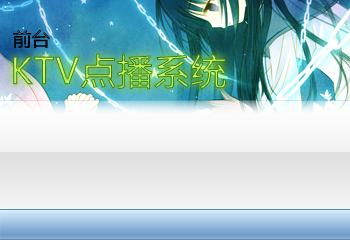
<style>
.page{position:relative;width:350px;height:240px}
.page>*{position:absolute;margin:0}
.t1{font:18.2px "MicrosoftYaHei";color:#000000;font-weight:bold}
.t2{font:35.8px "MicrosoftYaHei";font-weight:bold}
</style>
<div class="page">
<p class="t1" style="left:13px;top:30px;width:37px;height:18px">前台</p>
<p class="t2" style="left:13px;top:53px;width:214px;height:37px">KTV点播系统</p>
</div>
